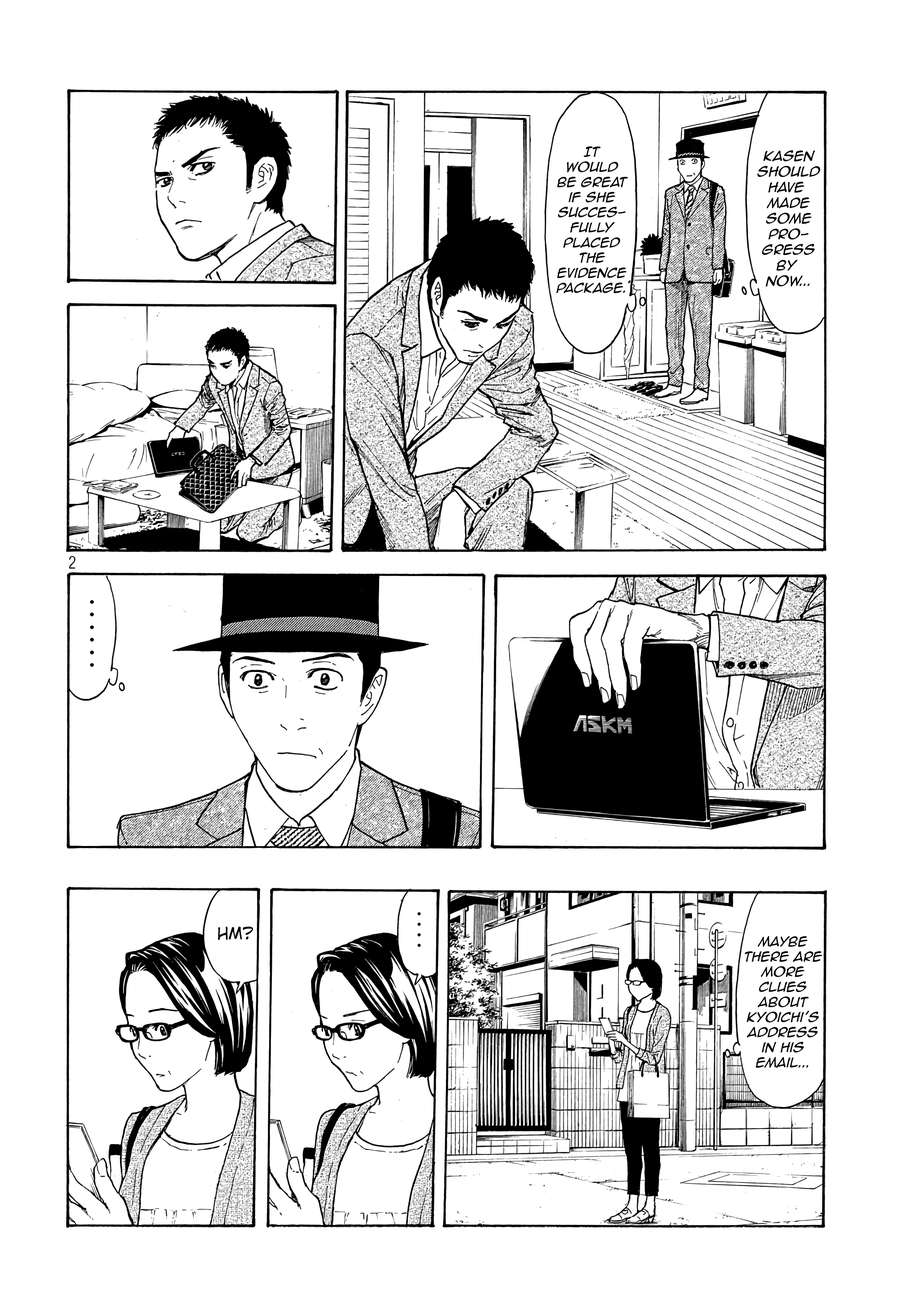
<style>
.page{position:relative;width:916px;height:1301px;background:#ffffff}
.page>*{position:absolute;margin:0}
.t1{font:12.6px "AnimeAce2.0BB-Italic";color:#000000}
.t2{font:13px "AnimeAce2.0BB-Italic";color:#000000}
</style>
<div class="page">
<p class="t1" style="left:557px;top:146px;width:71px;height:148px;text-align:center">It <br>would be great if she succesfully placed the <br>evidence package.</p>
<p class="t2" style="left:757px;top:150px;width:64px;height:137px;text-align:center">Kasen<br>should<br>have <br>made<br>some<br>pro-<br>gress<br>by <br>now...</p>
<p class="t1" style="left:745px;top:936px;width:78px;height:132px;text-align:center">maybe there are more clues about kyoichi’s address in his email...</p>
</div>
